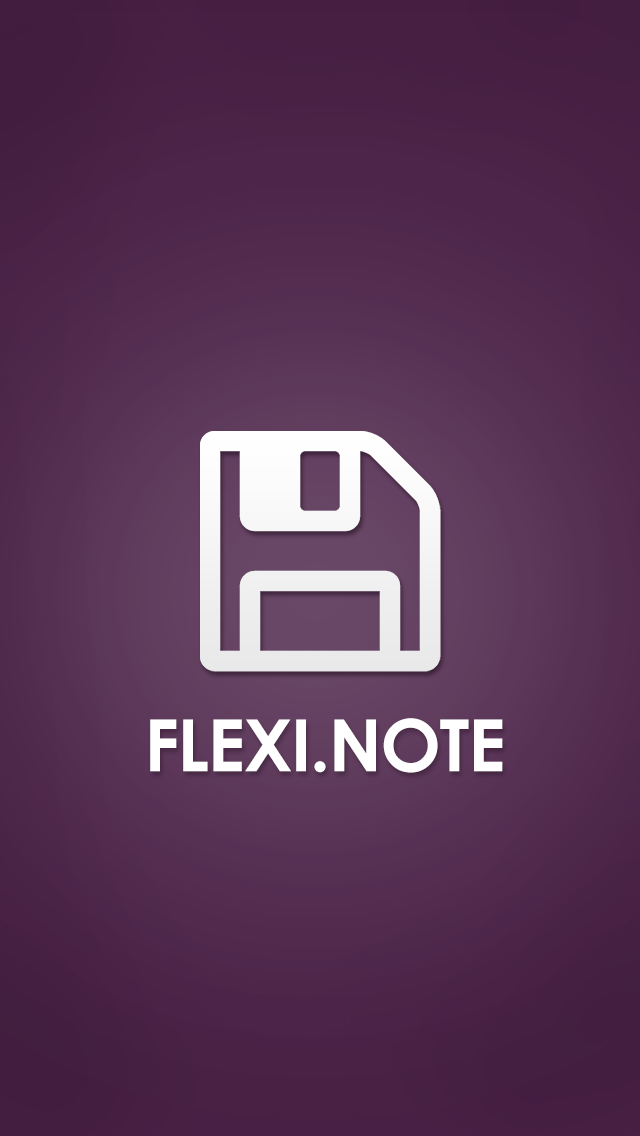
<style>
.page{position:relative;width:640px;height:1136px}
.page>*{position:absolute;margin:0}
.t1{font:72px "CenturyGothic-Bold";letter-spacing:-0.02em;color:#ffffff;text-transform:uppercase}
</style>
<div class="page">
<p class="t1" style="left:150px;top:718px;width:353px;height:55px">flexi.note</p>
</div>
